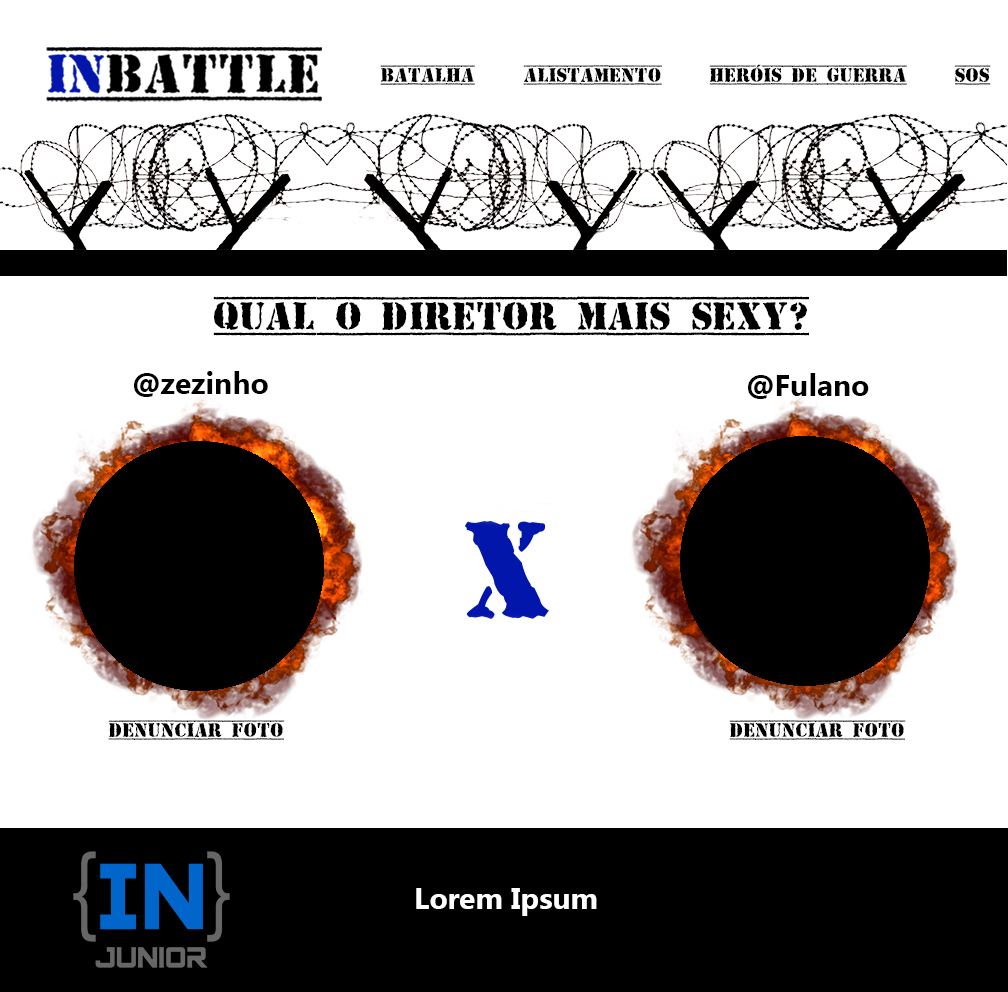
<style>
.page{position:relative;width:1008px;height:992px;background:#ffffff}
.page>*{position:absolute;margin:0}
.t1{font:20px "TopSecret";color:#000000}
.t2{font:40px "TopSecret";color:#000000}
.t3{font:30px "LaoUI-Bold";color:#000000}
.t4{font:30px "LaoUI-Bold";color:#ffffff}
</style>
<div class="page">
<p class="t1" style="left:380px;top:65px;width:95px;height:20px">batalha</p>
<p class="t1" style="left:523px;top:65px;width:139px;height:20px">Alistamento</p>
<p class="t1" style="left:709px;top:64px;width:198px;height:21px">Heróis de Guerra</p>
<p class="t1" style="left:955px;top:65px;width:36px;height:20px">SOS</p>
<p class="t2" style="left:213px;top:296px;width:596px;height:40px">Qual o diretor mais sexy?</p>
<p class="t3" style="left:134px;top:371px;width:134px;height:26px">@zezinho</p>
<p class="t3" style="left:748px;top:373px;width:121px;height:26px">@Fulano</p>
<p class="t1" style="left:108px;top:720px;width:177px;height:20px">Denunciar foto</p>
<p class="t1" style="left:729px;top:720px;width:177px;height:20px">Denunciar Foto</p>
<p class="t4" style="left:416px;top:888px;width:181px;height:28px">Lorem Ipsum</p>
</div>
